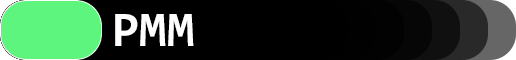
<style>
.page{position:relative;width:516px;height:60px;background:#000000}
.page>*{position:absolute;margin:0}
.t1{font:50px "Consolas-Bold";color:#ffffff;font-variant:small-caps}
</style>
<div class="page">
<p class="t1" style="left:115px;top:14px;width:79px;height:32px">PMM</p>
</div>
